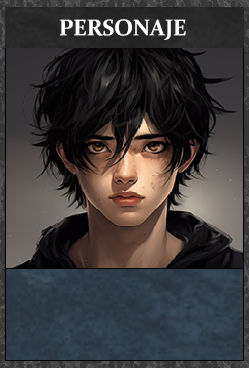
<style>
.page{position:relative;width:249px;height:368px}
.page>*{position:absolute;margin:0}
.t1{font:22.7px "Constantia-Bold";letter-spacing:-0.02em;color:#ffffff}
</style>
<div class="page">
<p class="t1" style="left:59px;top:19px;width:127px;height:21px">PERSONAJE</p>
</div>
